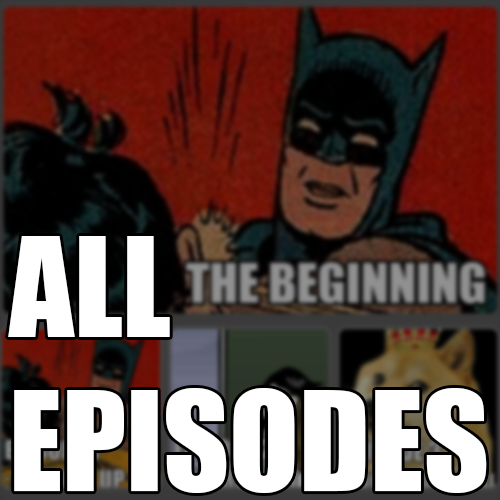
<style>
.page{position:relative;width:500px;height:500px}
.page>*{position:absolute;margin:0}
.t1{font:127.8px "Impact";color:#ffffff}
</style>
<div class="page">
<p class="t1" style="left:8px;top:236px;width:479px;height:257px">ALL <br>EPISODES</p>
</div>
